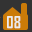
<style>
.page{position:relative;width:32px;height:32px;background:#333333}
.page>*{position:absolute;margin:0}
.t1{font:16px "AgencyFB-Bold";color:#ececec}
</style>
<div class="page">
<p class="t1" style="left:7px;top:16px;width:14px;height:13px">08</p>
</div>
